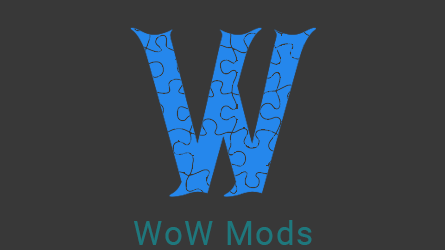
<style>
.page{position:relative;width:445px;height:250px;background:#383838}
.page>*{position:absolute;margin:0}
.t1{font:33px "Roboto-Regular";letter-spacing:0.05em;color:#1e787d}
</style>
<div class="page">
<p class="t1" style="left:134px;top:220px;width:178px;height:25px">WoW Mods</p>
</div>
